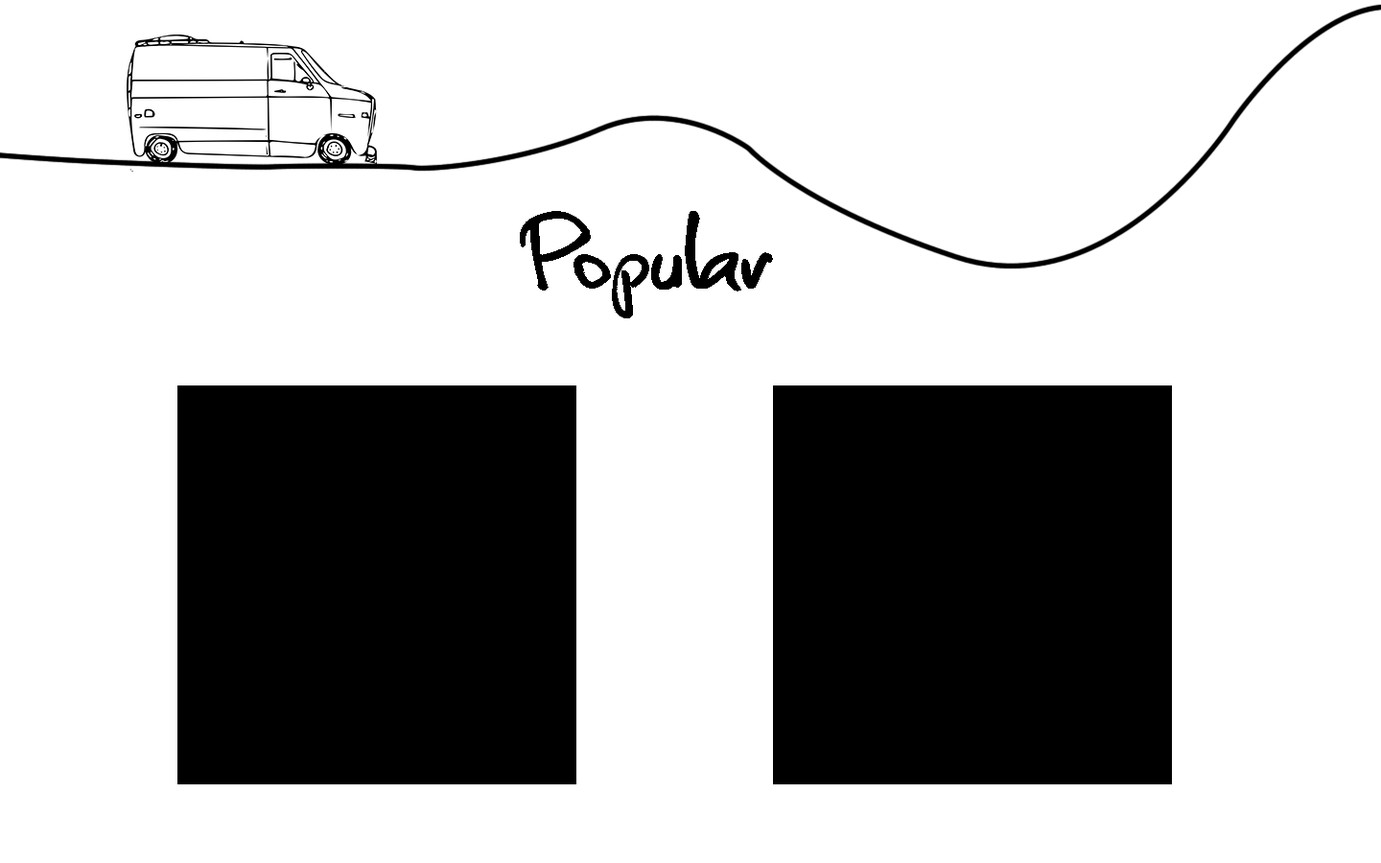
<style>
.page{position:relative;width:1381px;height:863px;background:#ffffff}
.page>*{position:absolute;margin:0}
.t1{font:143.9px "Christopherhand";color:#000000}
</style>
<div class="page">
<p class="t1" style="left:520px;top:211px;width:253px;height:107px">Popular</p>
</div>
